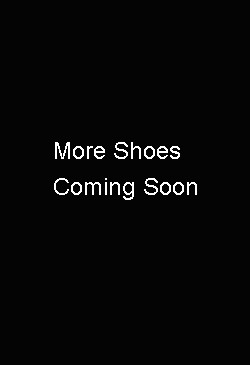
<style>
.page{position:relative;width:250px;height:365px;background:#040404}
.page>*{position:absolute;margin:0}
.t1{font:24px/36px "ArialMT";color:#ffffff}
</style>
<div class="page">
<p class="t1" style="left:54px;top:142px;width:143px;height:58px">More Shoes <br>Coming Soon</p>
</div>
